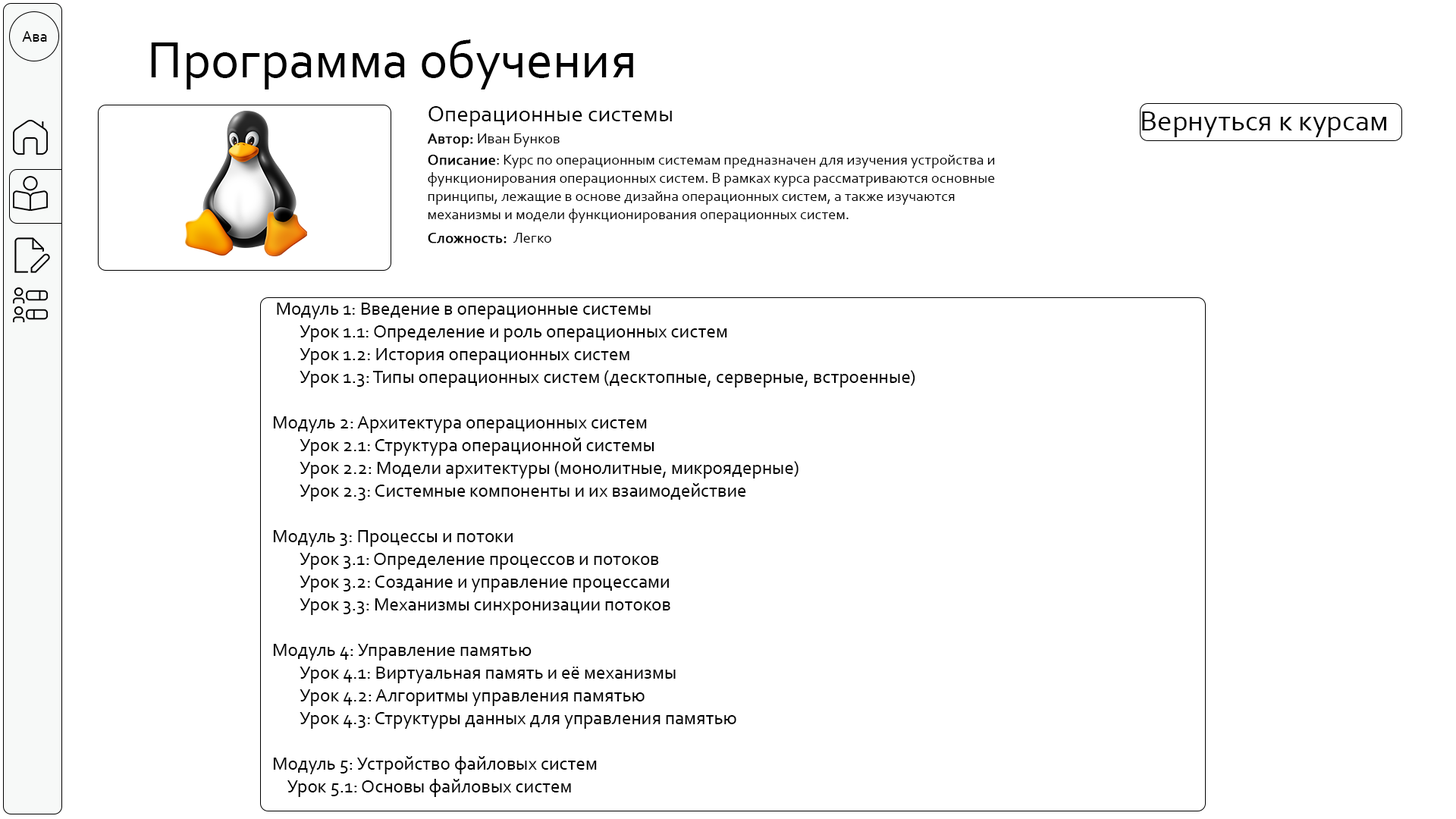
<style>
.page{position:relative;width:1456px;height:819px;background:#ffffff}
.page>*{position:absolute;margin:0}
.t1{font:15.9px "Corbel";color:#000000}
.t2{font:53.1px "Corbel";color:#000000}
.t3{font:23.5px "Corbel";color:#000000}
.t4{font:29.6px "Corbel";color:#000000}
.t5{font:15.2px "Corbel";color:#000000}
.t6{font:15.2px "Corbel";color:#000000;font-weight:bold}
.t7{font:19px "Corbel";color:#000000}
</style>
<div class="page">
<p class="t1" style="left:22px;top:31px;width:25px;height:11px">Ава</p>
<p class="t2" style="left:151px;top:39px;width:482px;height:50px">Программа обучения</p>
<p class="t3" style="left:428px;top:106px;width:244px;height:21px">Операционные системы</p>
<p class="t4" style="left:1142px;top:111px;width:244px;height:26px">Вернуться к курсам</p>
<p class="t5" style="left:428px;top:133px;width:132px;height:15px"><span class="t6">Автор:</span> Иван Бунков</p>
<p class="t5" style="left:428px;top:155px;width:567px;height:68px"><span class="t6">Описание</span>: Курс по операционным системам предназначен для изучения устройства и функционирования операционных систем. В рамках курса рассматриваются основные принципы, лежащие в основе дизайна операционных систем, а также изучаются механизмы и модели функционирования операционных систем.</p>
<p class="t6" style="left:428px;top:233px;width:123px;height:10px">Сложность: <span class="t5"> Легко</span></p>
<p class="t7" style="left:273px;top:303px;width:642px;height:494px">Модуль 1: Введение в операционные системы<br>  Урок 1.1: Определение и роль операционных систем<br> Урок 1.2: История операционных систем<br> Урок 1.3: Типы операционных систем (десктопные, серверные, встроенные)<br><br>Модуль 2: Архитектура операционных систем<br> Урок 2.1: Структура операционной системы<br> Урок 2.2: Модели архитектуры (монолитные, микроядерные)<br> Урок 2.3: Системные компоненты и их взаимодействие<br><br>Модуль 3: Процессы и потоки<br> Урок 3.1: Определение процессов и потоков<br> Урок 3.2: Создание и управление процессами<br> Урок 3.3: Механизмы синхронизации потоков<br><br>Модуль 4: Управление памятью<br> Урок 4.1: Виртуальная память и её механизмы<br> Урок 4.2: Алгоритмы управления памятью<br> Урок 4.3: Структуры данных для управления памятью<br><br>Модуль 5: Устройство файловых систем<br>    Урок 5.1: Основы файловых систем<br>    Урок 5.2: Структуры данных для файловых систем<br>    Урок 5.3: Управление доступом к файлам</p>
</div>
